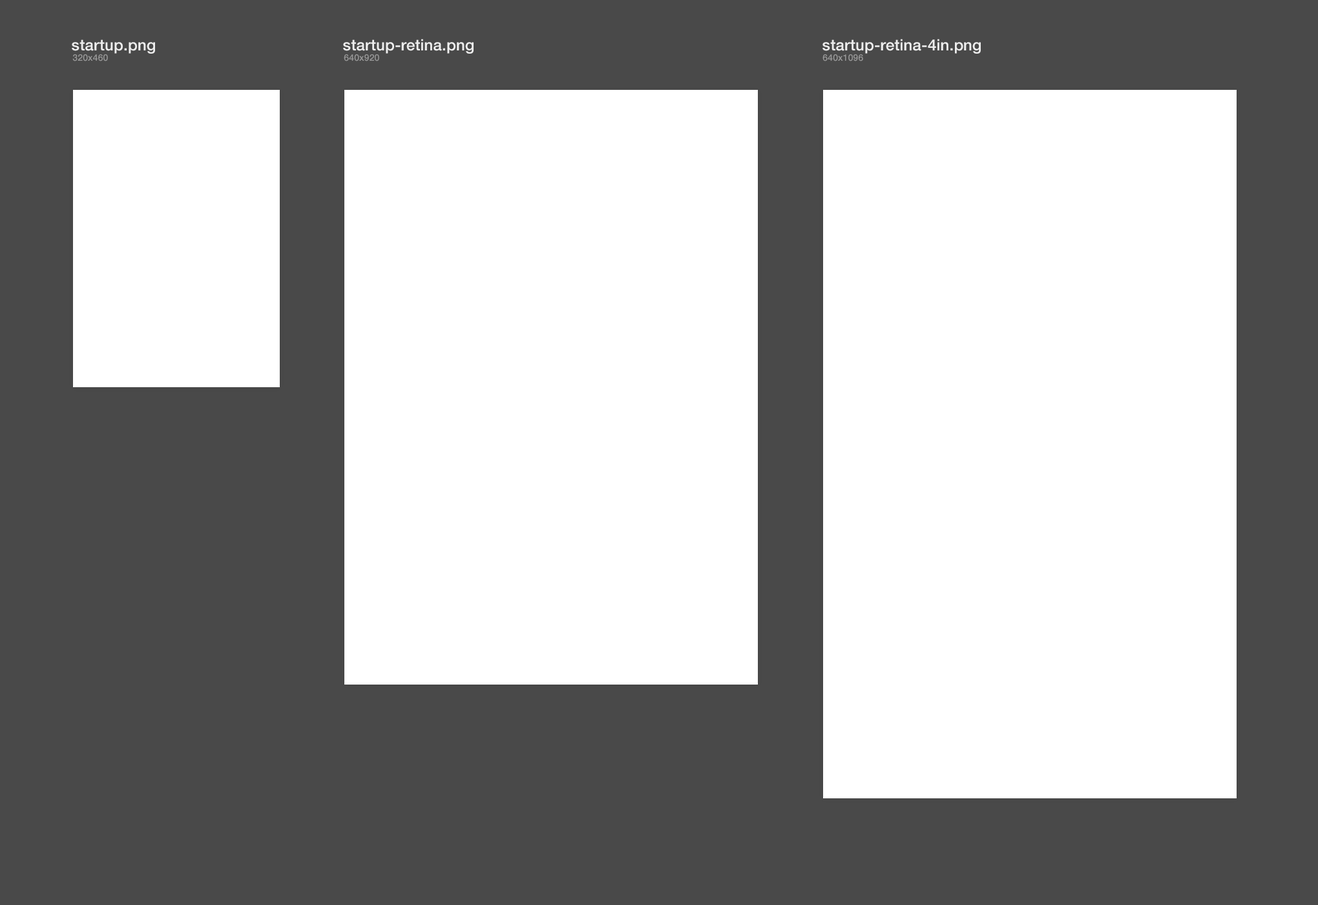
<style>
.page{position:relative;width:1318px;height:905px;background:#ffffff}
.page>*{position:absolute;margin:0}
.t1{font:15.5px "HelveticaNeue-Medium";letter-spacing:0.01em;color:#eeeeee}
.t2{font:9px "HelveticaNeue-Medium";letter-spacing:0.01em;color:#999999}
</style>
<div class="page">
<p class="t1" style="left:72px;top:39px;width:83px;height:15px">startup.png</p>
<p class="t1" style="left:343px;top:39px;width:131px;height:15px">startup-retina.png</p>
<p class="t1" style="left:823px;top:39px;width:158px;height:15px">startup-retina-4in.png</p>
<p class="t2" style="left:72px;top:54px;width:36px;height:7px">320x460</p>
<p class="t2" style="left:344px;top:54px;width:35px;height:7px">640x920</p>
<p class="t2" style="left:823px;top:54px;width:40px;height:7px">640x1096</p>
</div>
